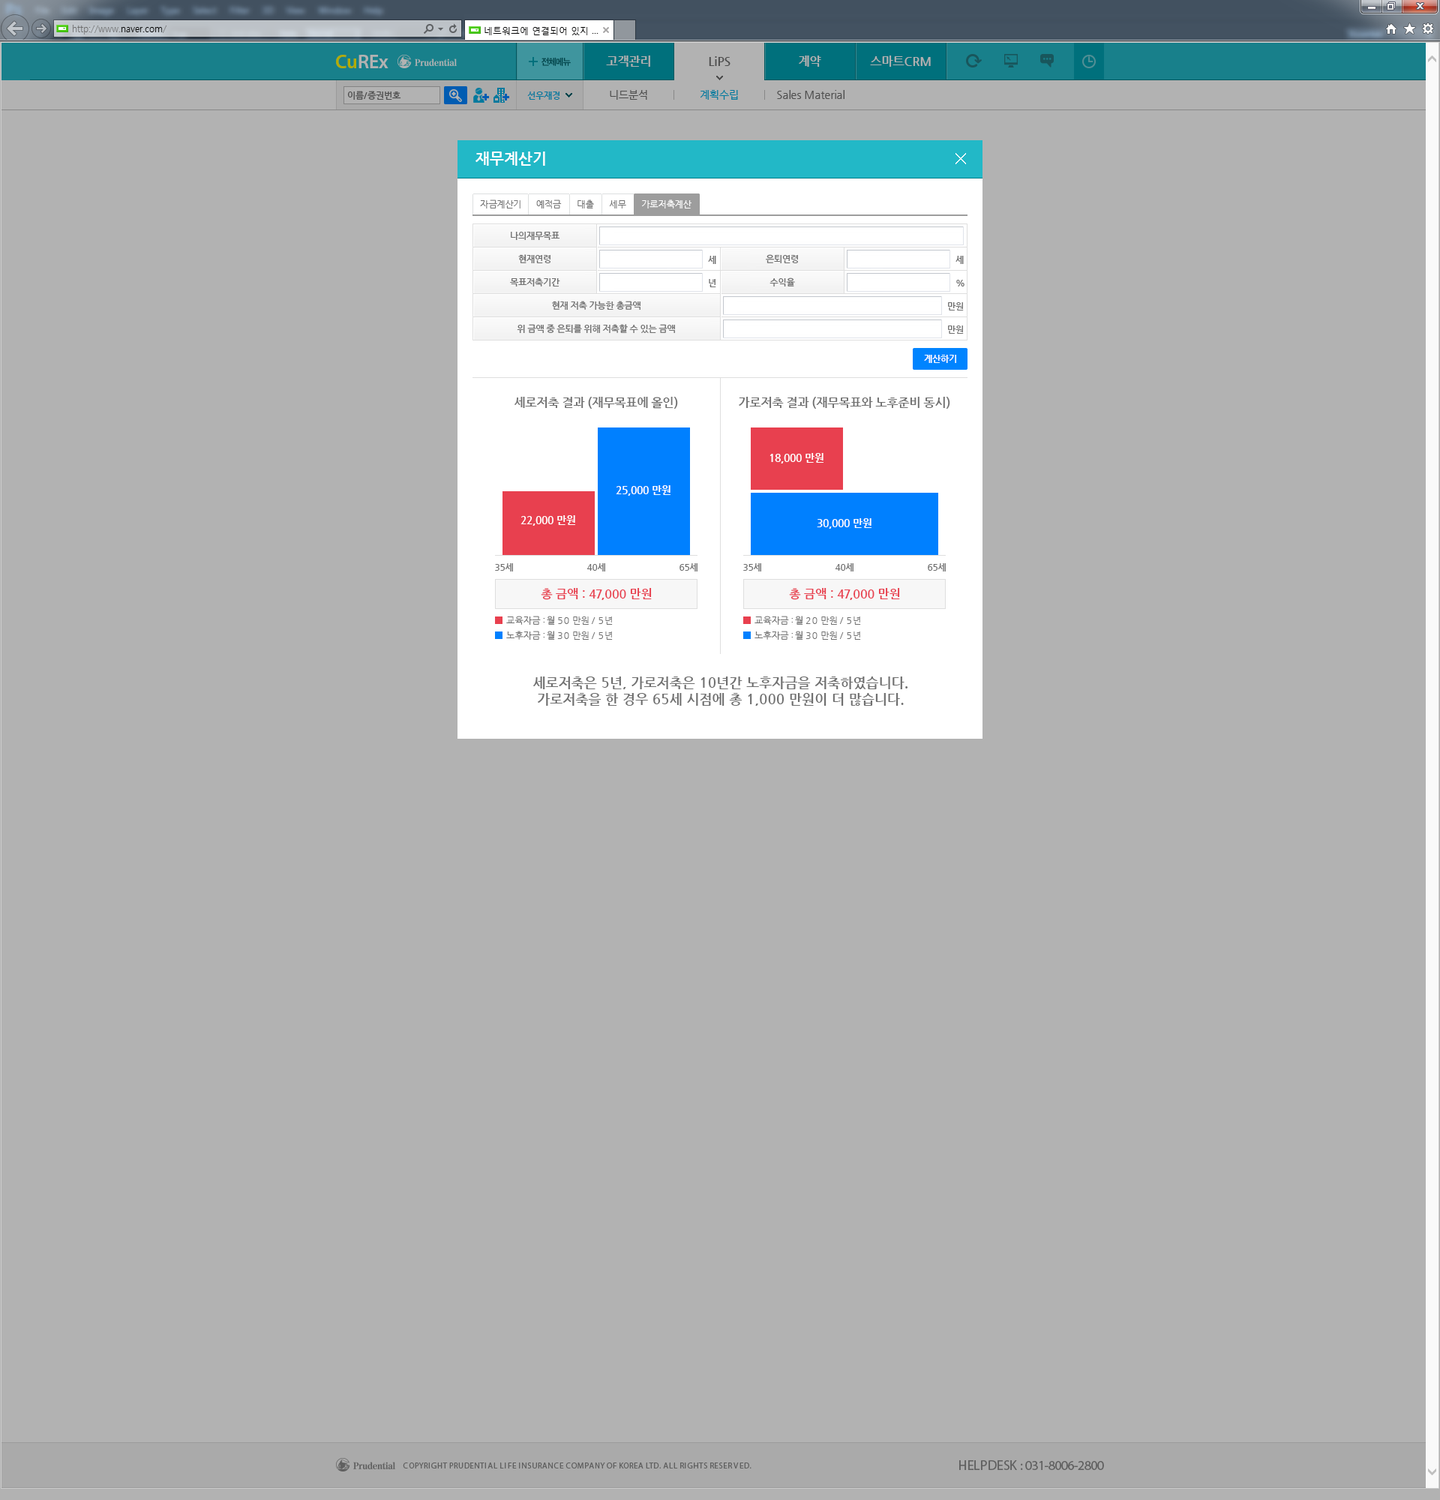
<style>
.page{position:relative;width:1440px;height:1500px;background:#b2b2b2}
.page>*{position:absolute;margin:0}
.t1{font:15px "NanumGothicBold";color:#ffffff}
.t2{font:9px "NanumGothic";color:#707070}
.t3{font:9px "NanumGothic";color:#ffffff}
.t4{font:9px/23.2px "NanumGothicBold";color:#707070}
.t5{font:9px "NanumGothicBold";color:#707070}
.t6{font:9px "NanumGothicBold";color:#ffffff}
.t7{font:12px "NanumGothicBold";color:#707070}
.t8{font:10.5px "NanumGothicBold";color:#ffffff}
.t9{font:12px "NanumGothicBold";color:#e8404f}
.t10{font:13.5px "NanumGothicBold";color:#707070}
</style>
<div class="page">
<p class="t1" style="left:476px;top:152px;width:69px;height:14px">재무계산기</p>
<p class="t2" style="left:480px;top:200px;width:40px;height:8px">자금계산기</p>
<p class="t2" style="left:536px;top:200px;width:26px;height:8px">예적금</p>
<p class="t2" style="left:578px;top:200px;width:16px;height:8px">대출</p>
<p class="t2" style="left:609px;top:200px;width:17px;height:8px">세무</p>
<p class="t3" style="left:642px;top:200px;width:50px;height:8px">가로저축계산</p>
<p class="t4" style="left:510px;top:232px;width:50px;height:54px;text-align:center">나의재무목표<br>현재연령<br>목표저축기간</p>
<p class="t5" style="left:708px;top:256px;width:8px;height:8px">세</p>
<p class="t4" style="left:766px;top:254px;width:32px;height:32px;text-align:center">은퇴연령<br>수익율</p>
<p class="t5" style="left:956px;top:256px;width:8px;height:8px">세</p>
<p class="t5" style="left:709px;top:279px;width:7px;height:8px">년</p>
<p class="t5" style="left:956px;top:280px;width:8px;height:6px">%</p>
<p class="t4" style="left:517px;top:301px;width:158px;height:32px;text-align:center">현재 저축 가능한 총금액<br>위 금액 중 은퇴를 위해 저축할 수 있는 금액</p>
<p class="t5" style="left:948px;top:302px;width:16px;height:8px">만원</p>
<p class="t5" style="left:948px;top:326px;width:16px;height:8px">만원</p>
<p class="t6" style="left:924px;top:355px;width:32px;height:8px">계산하기</p>
<p class="t7" style="left:514px;top:397px;width:164px;height:12px">세로저축 결과 (재무목표에 올인)</p>
<p class="t7" style="left:739px;top:397px;width:211px;height:12px">가로저축 결과 (재무목표와 노후준비 동시)</p>
<p class="t8" style="left:770px;top:453px;width:54px;height:11px">18,000 만원</p>
<p class="t8" style="left:616px;top:485px;width:54px;height:11px">25,000 만원</p>
<p class="t8" style="left:520px;top:515px;width:55px;height:11px">22,000 만원</p>
<p class="t8" style="left:817px;top:518px;width:55px;height:11px">30,000 만원</p>
<p class="t5" style="left:495px;top:563px;width:18px;height:9px">35세</p>
<p class="t5" style="left:586px;top:563px;width:19px;height:9px">40세</p>
<p class="t5" style="left:680px;top:563px;width:18px;height:9px">65세</p>
<p class="t5" style="left:743px;top:563px;width:18px;height:9px">35세</p>
<p class="t5" style="left:835px;top:563px;width:19px;height:9px">40세</p>
<p class="t5" style="left:928px;top:563px;width:18px;height:9px">65세</p>
<p class="t9" style="left:541px;top:588px;width:111px;height:12px">총 금액 : 47,000 만원</p>
<p class="t9" style="left:789px;top:588px;width:111px;height:12px">총 금액 : 47,000 만원</p>
<p class="t2" style="left:506px;top:616px;width:107px;height:9px">교육자금 : 월 50 만원 / 5년</p>
<p class="t2" style="left:754px;top:616px;width:107px;height:9px">교육자금 : 월 20 만원 / 5년</p>
<p class="t2" style="left:506px;top:631px;width:107px;height:9px">노후자금 : 월 30 만원 / 5년</p>
<p class="t2" style="left:754px;top:631px;width:107px;height:9px">노후자금 : 월 30 만원 / 5년</p>
<p class="t10" style="left:533px;top:676px;width:375px;height:30px;text-align:center">세로저축은 5년, 가로저축은 10년간 노후자금을 저축하였습니다.<br>가로저축을 한 경우 65세 시점에 총 1,000 만원이 더 많습니다.</p>
</div>
